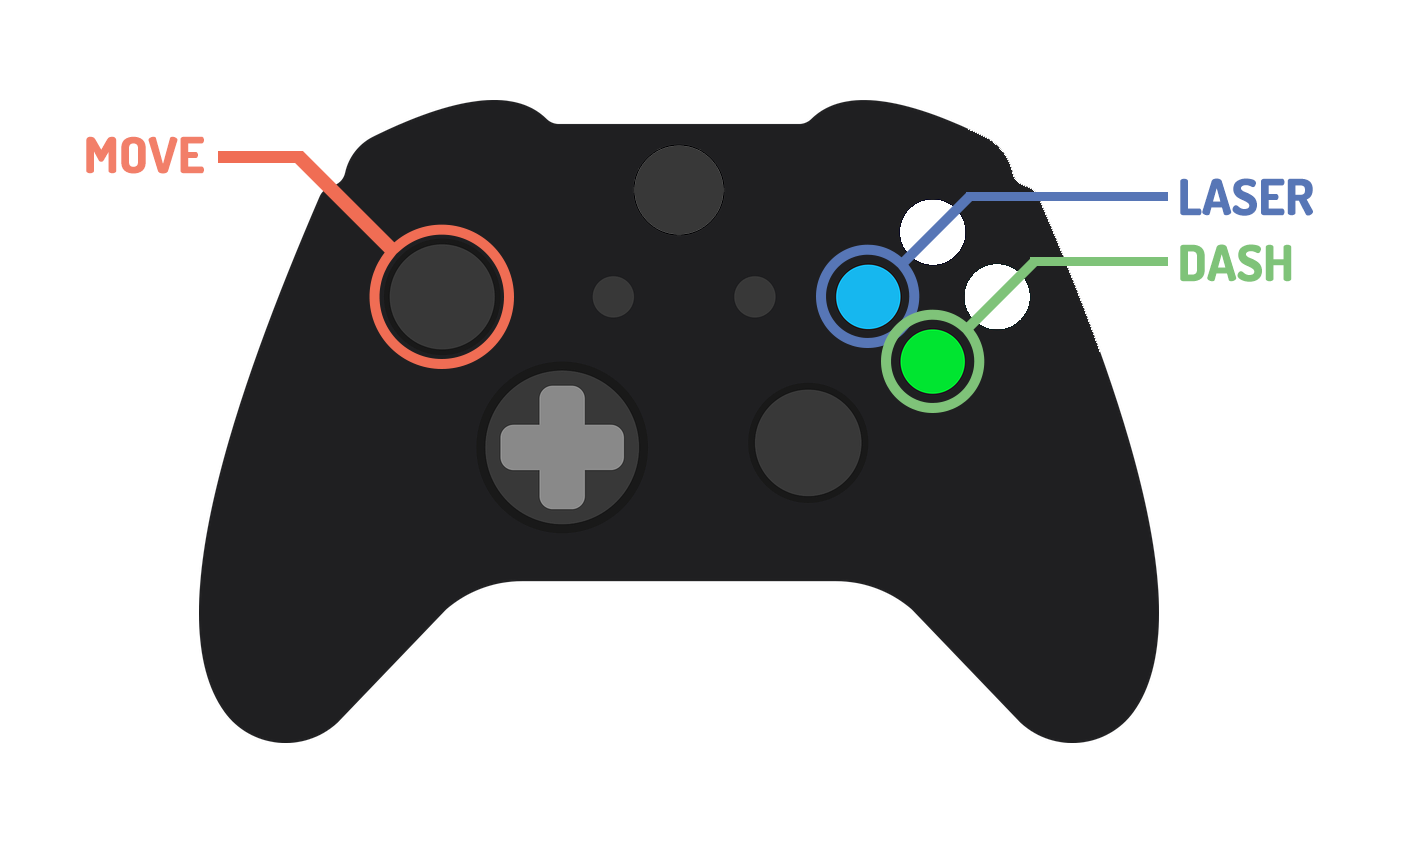
<style>
.page{position:relative;width:1410px;height:843px;background:#ffffff}
.page>*{position:absolute;margin:0}
.t1{font:50px "Dosis-ExtraBold";color:#f27f69}
.t2{font:50px "Dosis-ExtraBold";color:#5776b6}
.t3{font:50px "Dosis-ExtraBold";color:#7fc379}
</style>
<div class="page">
<p class="t1" style="left:86px;top:136px;width:118px;height:38px">MOVE</p>
<p class="t2" style="left:1180px;top:178px;width:133px;height:38px">LASER</p>
<p class="t3" style="left:1180px;top:244px;width:112px;height:38px">DASH</p>
</div>
